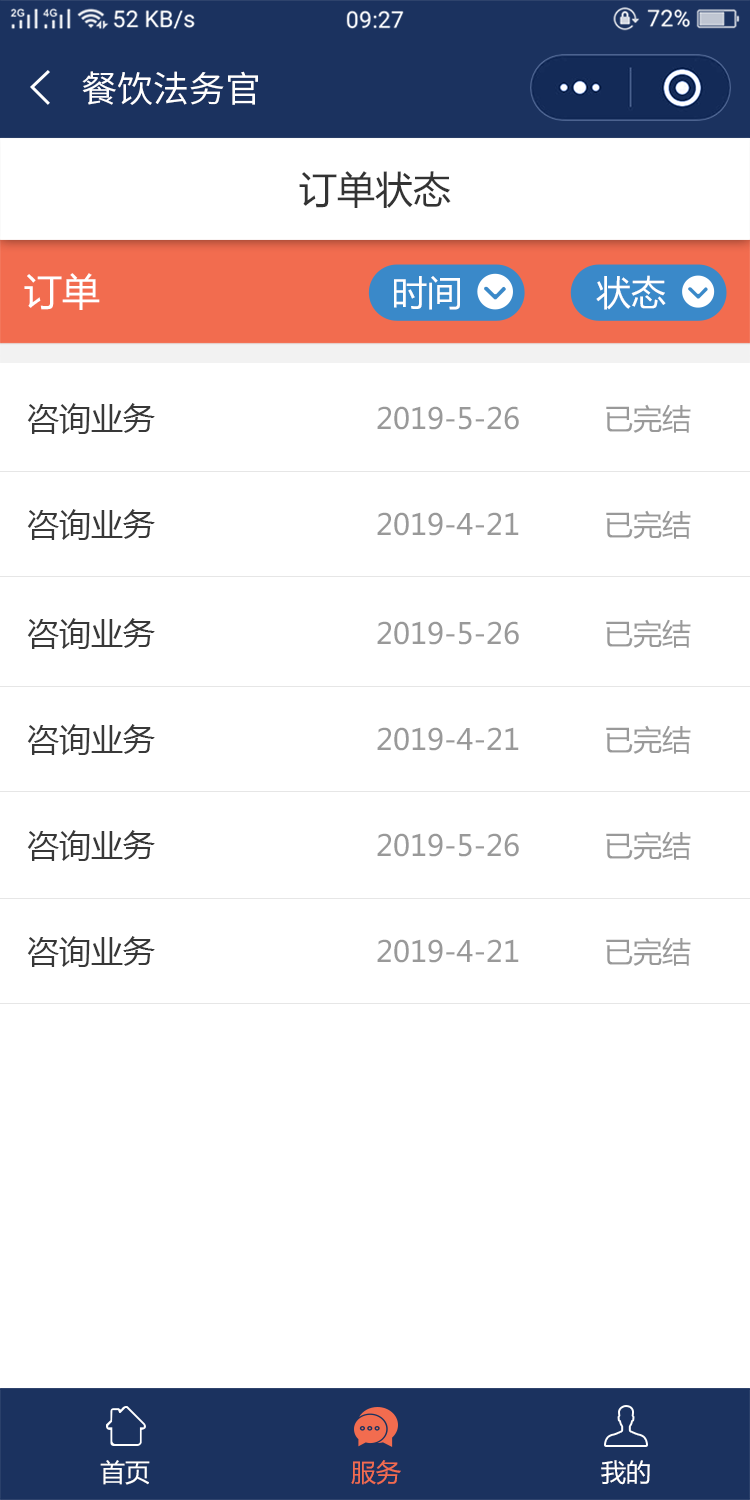
<style>
.page{position:relative;width:750px;height:1500px;background:#ffffff}
.page>*{position:absolute;margin:0}
.t1{font:36px "SourceHanSansCN-Normal";color:#ffffff}
.t2{font:38px "MicrosoftYaHei";color:#333333}
.t3{font:38px "MicrosoftYaHei";color:#ffffff}
.t4{font:35px "MicrosoftYaHei";color:#ffffff}
.t5{font:32px "MicrosoftYaHei";color:#383838}
.t6{font:29px "MicrosoftYaHei";color:#999999}
.t7{font:25px "MicrosoftYaHei";color:#ffffff}
.t8{font:25px "MicrosoftYaHei";color:#f26c4f}
</style>
<div class="page">
<p class="t1" style="left:82px;top:71px;width:176px;height:34px">餐饮法务官</p>
<p class="t2" style="left:299px;top:171px;width:152px;height:37px">订单状态</p>
<p class="t3" style="left:24px;top:273px;width:76px;height:37px">订单</p>
<p class="t4" style="left:394px;top:276px;width:66px;height:34px">时间</p>
<p class="t4" style="left:596px;top:275px;width:70px;height:35px">状态</p>
<p class="t5" style="left:27px;top:403px;width:128px;height:31px">咨询业务</p>
<p class="t6" style="left:377px;top:406px;width:142px;height:24px">2019-5-26</p>
<p class="t6" style="left:606px;top:404px;width:85px;height:29px">已完结</p>
<p class="t5" style="left:27px;top:509px;width:128px;height:31px">咨询业务</p>
<p class="t6" style="left:606px;top:510px;width:85px;height:29px">已完结</p>
<p class="t6" style="left:377px;top:512px;width:142px;height:24px">2019-4-21</p>
<p class="t5" style="left:27px;top:618px;width:128px;height:31px">咨询业务</p>
<p class="t6" style="left:377px;top:621px;width:142px;height:24px">2019-5-26</p>
<p class="t6" style="left:606px;top:619px;width:85px;height:29px">已完结</p>
<p class="t5" style="left:27px;top:724px;width:128px;height:31px">咨询业务</p>
<p class="t6" style="left:606px;top:725px;width:85px;height:29px">已完结</p>
<p class="t6" style="left:377px;top:727px;width:142px;height:24px">2019-4-21</p>
<p class="t5" style="left:27px;top:830px;width:128px;height:31px">咨询业务</p>
<p class="t6" style="left:377px;top:833px;width:142px;height:24px">2019-5-26</p>
<p class="t6" style="left:606px;top:831px;width:85px;height:29px">已完结</p>
<p class="t5" style="left:27px;top:936px;width:128px;height:31px">咨询业务</p>
<p class="t6" style="left:377px;top:939px;width:142px;height:24px">2019-4-21</p>
<p class="t6" style="left:606px;top:937px;width:85px;height:29px">已完结</p>
<p class="t7" style="left:100px;top:1460px;width:50px;height:25px">首页</p>
<p class="t8" style="left:351px;top:1460px;width:50px;height:25px">服务</p>
<p class="t7" style="left:601px;top:1460px;width:49px;height:25px">我的</p>
</div>
